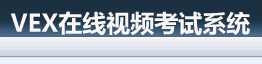
<style>
.page{position:relative;width:262px;height:64px}
.page>*{position:absolute;margin:0}
.t1{font:24px "MicrosoftYaHei-Bold";color:#fbf7f7}
</style>
<div class="page">
<p class="t1" style="left:10px;top:11px;width:240px;height:25px">VEX在线视频考试系统</p>
</div>
